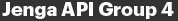
<style>
.page{position:relative;width:178px;height:21px;background:#333333}
.page>*{position:absolute;margin:0}
.t1{font:19px "Graphik-Bold";color:#fffeff}
</style>
<div class="page">
<p class="t1" style="left:2px;top:2px;width:172px;height:17px">Jenga API Group 4</p>
</div>
